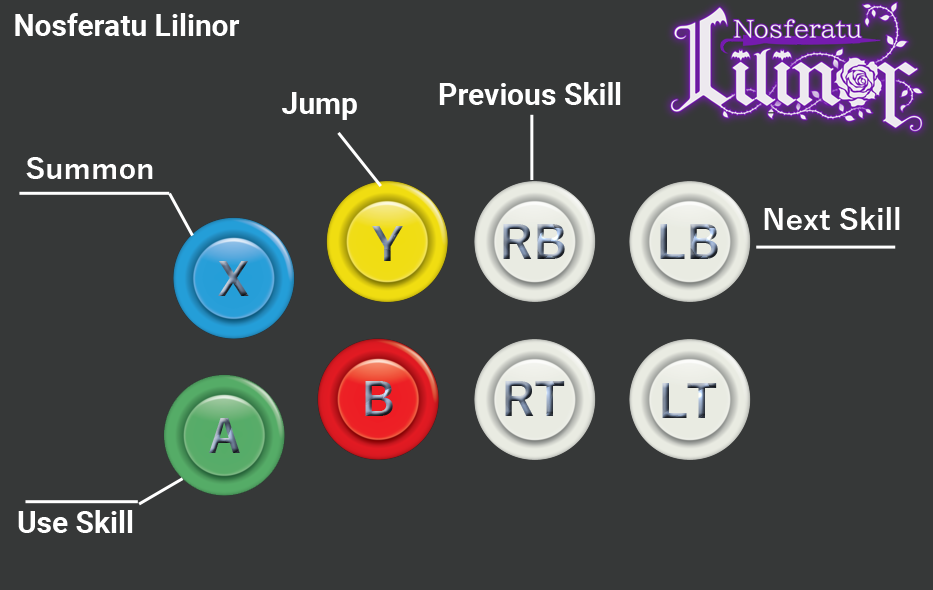
<style>
.page{position:relative;width:933px;height:590px;background:#363838}
.page>*{position:absolute;margin:0}
.t1{font:30px "Roboto-Bold";color:#ffffff}
.t2{font:30px "YuGothic-Bold";color:#ffffff}
</style>
<div class="page">
<p class="t1" style="left:15px;top:13px;width:225px;height:23px">Nosferatu Lilinor</p>
<p class="t1" style="left:439px;top:82px;width:182px;height:23px">Previous Skill</p>
<p class="t1" style="left:282px;top:92px;width:75px;height:28px">Jump</p>
<p class="t2" style="left:26px;top:157px;width:127px;height:22px">Summon</p>
<p class="t2" style="left:764px;top:207px;width:136px;height:23px">Next Skill</p>
<p class="t1" style="left:18px;top:510px;width:115px;height:23px">Use Skill</p>
</div>
